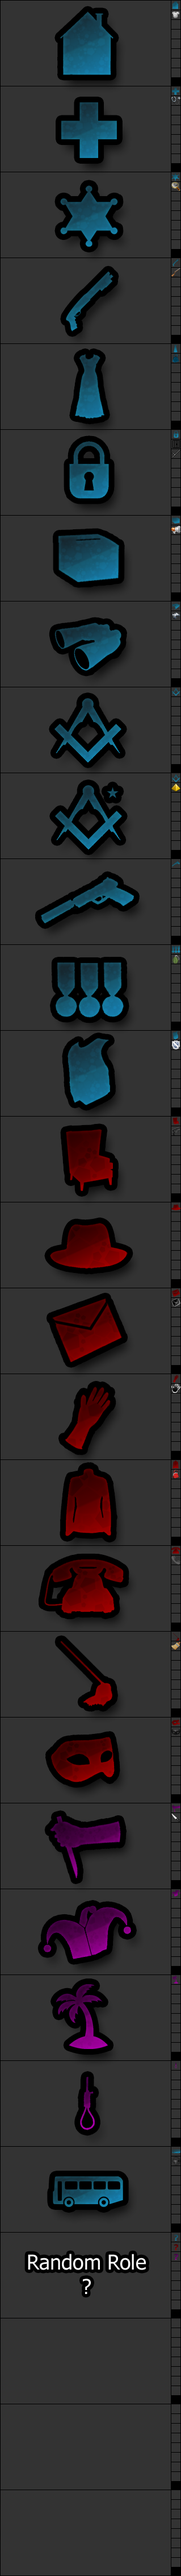
<style>
.page{position:relative;width:181px;height:2576px;background:#333333}
.page>*{position:absolute;margin:0}
.t1{font:8px "Tahoma-Bold"}
.t2{font:20.5px "Tahoma";color:#fefefe}
</style>
<div class="page">
<p class="t1" style="left:175px;top:2234px;width:4px;height:7px">?</p>
<p class="t1" style="left:175px;top:2244px;width:4px;height:6px">?</p>
<p class="t2" style="left:28px;top:2254px;width:118px;height:40px;text-align:center">Random Role<br>?</p>
<p class="t1" style="left:175px;top:2254px;width:4px;height:6px">?</p>
</div>
